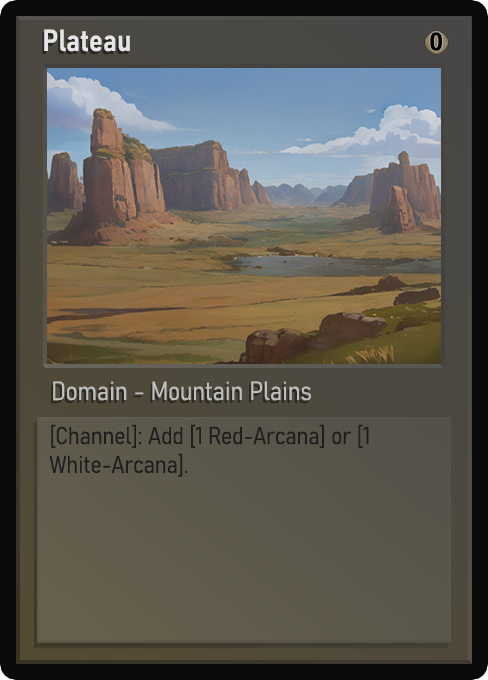
<style>
.page{position:relative;width:488px;height:680px}
.page>*{position:absolute;margin:0}
.t1{font:30px "Bahnschrift-SemiBoldSemiCondensed";color:#f2f2f2;font-weight:bold}
.t2{font:25px "WTRRoycroft";color:#000000;font-weight:bold;scale:1.09 1}
.t3{font:26px "Bahnschrift-LightSemiCondensed";color:#c8c8c8;font-weight:bold}
.t4{font:24px "Bahnschrift-LightSemiCondensed";color:#1e1e1e;font-weight:bold}
</style>
<div class="page">
<p class="t1" style="left:44px;top:29px;width:86px;height:23px;opacity:0.9">Plateau</p>
<p class="t2" style="left:430px;top:32px;width:12px;height:19px">0</p>
<p class="t3" style="left:53px;top:381px;width:258px;height:20px;opacity:0.9">Domain - Mountain Plains</p>
<p class="t4" style="left:49px;top:424px;width:320px;height:53px">[Channel]: Add [1 Red-Arcana] or [1 White-Arcana].</p>
</div>
